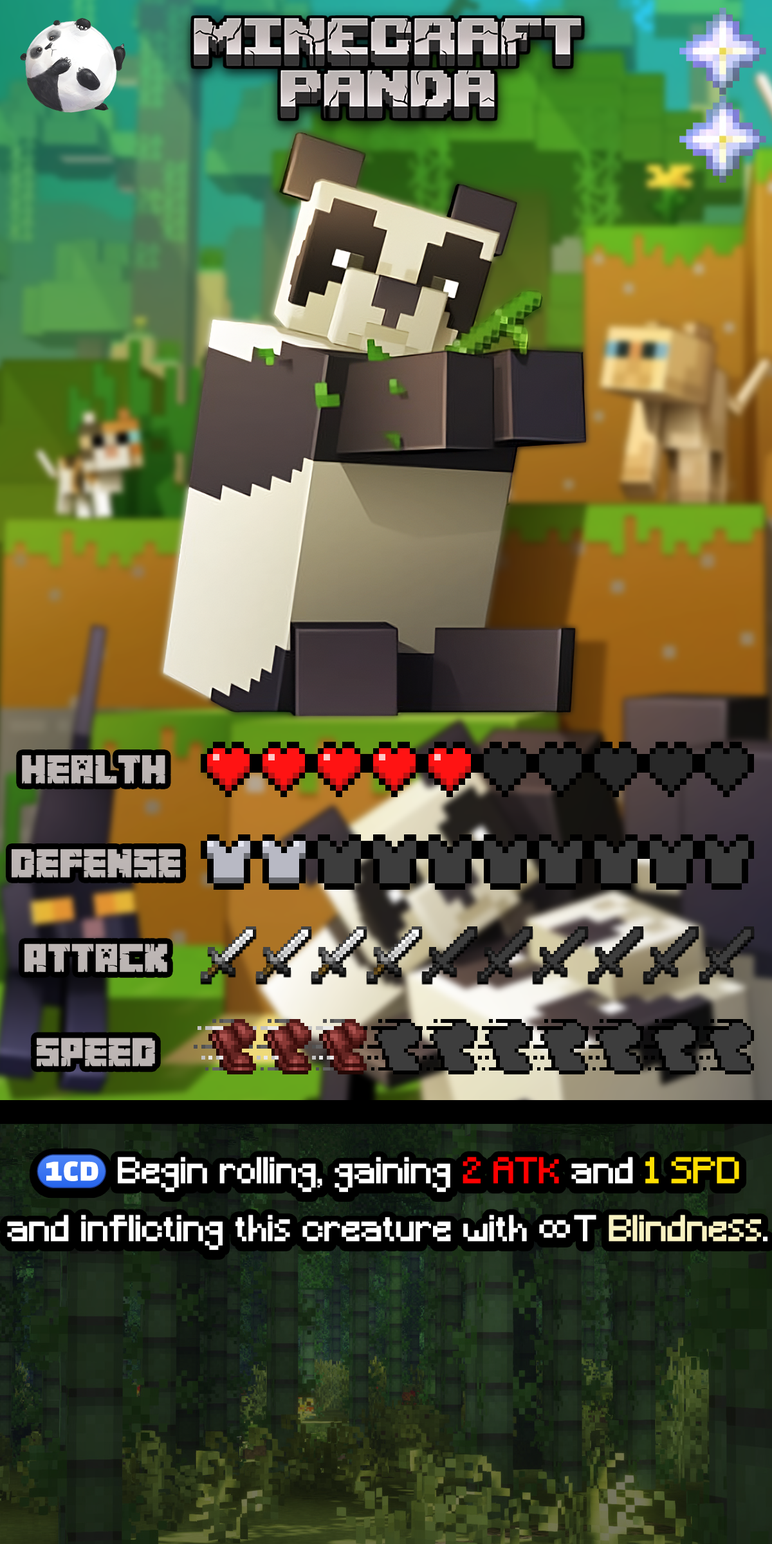
<style>
.page{position:relative;width:772px;height:1544px}
.page>*{position:absolute;margin:0}
.t1{font:61.1px "MinecrafterAlt";color:#bdb6b4}
.t2{font:34.7px/57.9px "Minecraft";color:#ffffff}
.t3{font:34.7px/57.9px "stoogedings-Regular";color:#ffffff}
.t4{font:34.7px/57.9px "Minecraft";color:#ff0000}
.t5{font:34.7px/57.9px "Minecraft";color:#ffde00}
.t6{font:34.7px/57.9px "Minecraftia-Regular";color:#ffffff}
.t7{font:34.7px/57.9px "Minecraft";color:#f9f2c2}
</style>
<div class="page">
<p class="t1" style="left:22px;top:755px;width:143px;height:29px">Health</p>
<p class="t1" style="left:12px;top:849px;width:168px;height:29px">Defense</p>
<p class="t1" style="left:24px;top:944px;width:143px;height:28px">Attack</p>
<p class="t1" style="left:37px;top:1038px;width:118px;height:29px">Speed</p>
<p class="t2" style="left:7px;top:1154px;width:761px;height:96px;text-align:center"><span class="t3">(1CD)</span> Begin rolling, gaining <span class="t4">2 ATK</span> and <span class="t5">1 SPD</span> and inflicting this creature with <span class="t6">∞</span>T <span class="t7">Blindness</span>.</p>
</div>
